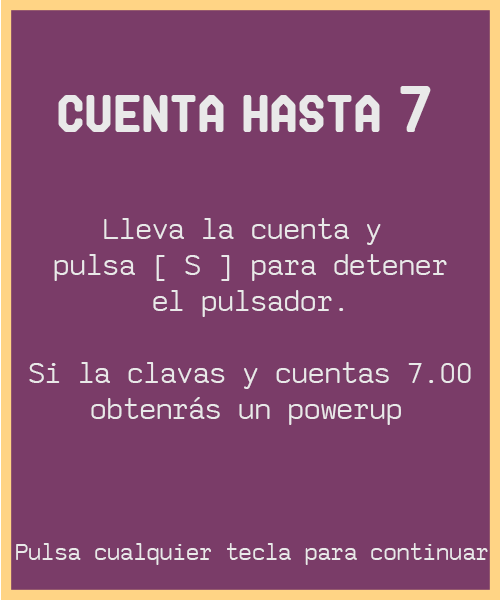
<style>
.page{position:relative;width:500px;height:600px;background:#7a3c68}
.page>*{position:absolute;margin:0}
.t1{font:54px "Makisupa";color:#e9e9e9}
.t2{font:30px "saxMono";color:#e9e9e9}
.t3{font:24px "saxMono";color:#e9e9e9}
</style>
<div class="page">
<p class="t1" style="left:58px;top:86px;width:373px;height:46px">cuenta hasta 7</p>
<p class="t2" style="left:29px;top:218px;width:442px;height:207px;text-align:center">Lleva la cuenta y <br>pulsa [ S ] para detener<br>el pulsador.<br><br>Si la clavas y cuentas 7.00<br>obtenrás un powerup</p>
<p class="t3" style="left:16px;top:543px;width:472px;height:22px">Pulsa cualquier tecla para continuar</p>
</div>
